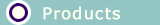
<style>
.page{position:relative;width:160px;height:25px;background:#94c5c5}
.page>*{position:absolute;margin:0}
.t1{font:16px "Verdana";letter-spacing:0.055em;color:#fffff0;font-weight:bold}
</style>
<div class="page">
<p class="t1" style="left:43px;top:6px;width:77px;height:14px">Products</p>
</div>
